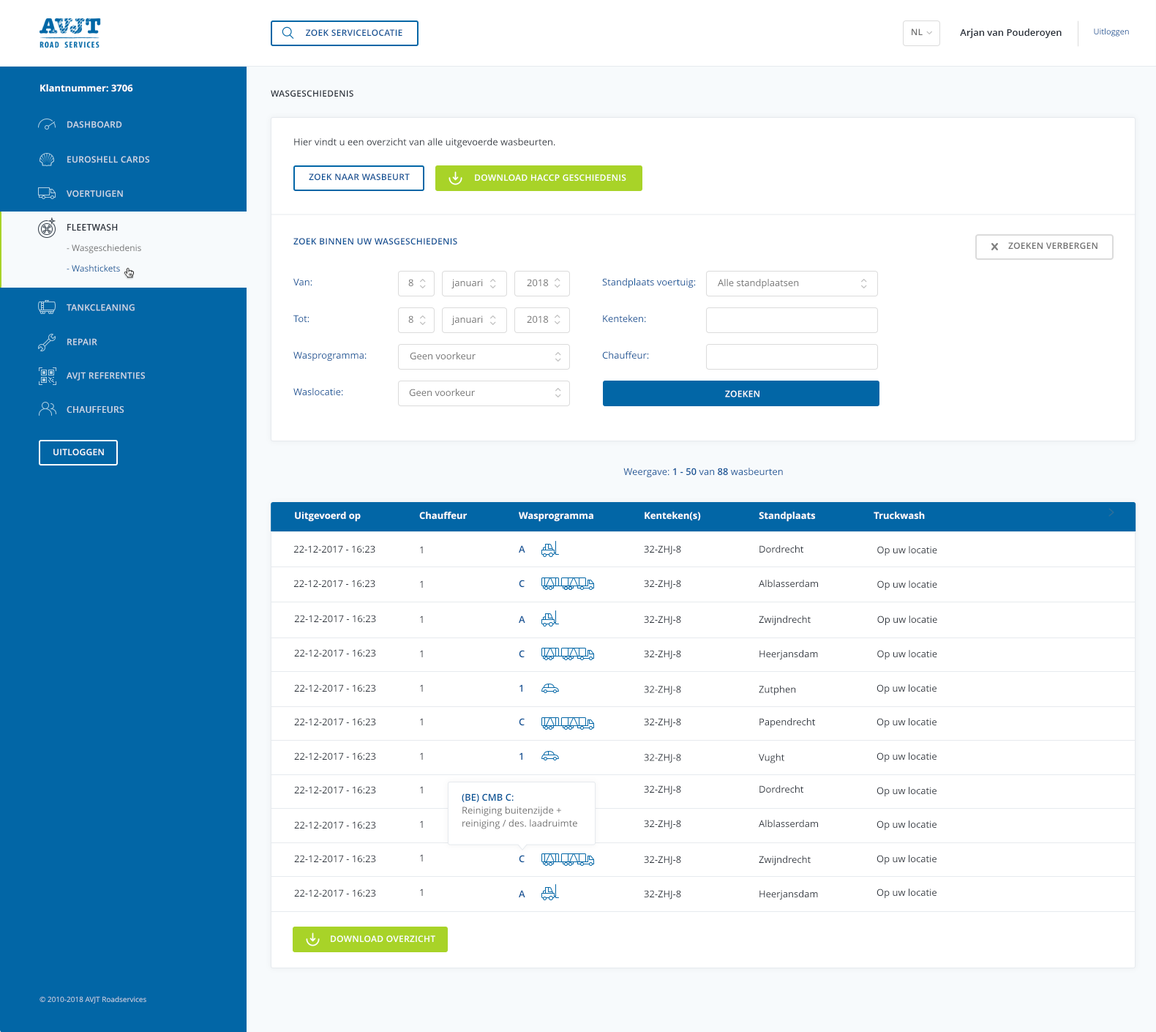
<style>
.page{position:relative;width:1156px;height:1032px;background:#ffffff}
.page>*{position:absolute;margin:0}
.t1{font:8.8px "OpenSans-Semibold";letter-spacing:0.023em;color:#0b5195;text-transform:uppercase}
.t2{font:8.8px "OpenSans-Semibold";letter-spacing:0.023em;color:#6d6d6d;text-transform:uppercase}
.t3{font:9.5px "OpenSans-Semibold";color:#262d37}
.t4{font:8px "OpenSans"}
.t5{font:9.5px "OpenSans-Bold";color:#ffffff}
.t6{font:8.8px "OpenSans-Semibold";letter-spacing:0.023em;color:#262d37;text-transform:uppercase}
.t7{font:8.8px "OpenSans-Semibold";letter-spacing:0.023em;color:#cbd8e6;text-transform:uppercase}
.t8{font:9.5px "OpenSans";color:#29303a}
.t9{font:8.8px "OpenSans-Semibold";letter-spacing:0.023em;color:#ffffff;text-transform:uppercase}
.t10{font:8.8px "OpenSans-Semibold";letter-spacing:0.023em;color:#cbd9e7;text-transform:uppercase}
.t11{font:8.8px "OpenSans";color:#6d6d6d}
.t12{font:8.8px "OpenSans";color:#0e5999}
.t13{font:9.5px "OpenSans";color:#0e5295}
.t14{font:9.5px "OpenSans";color:#6d6d6d}
.t15{font:9.5px "OpenSans";color:#135496}
.t16{font:9.5px "OpenSans";color:#155597}
.t17{font:9.5px "OpenSans";color:#2a5f9c}
.t18{font:9.5px "OpenSans";color:#145496}
.t19{font:9.5px "OpenSans";color:#0b5195}
.t20{font:9.5px "OpenSans-Semibold";color:#0b5195}
.t21{font:9.5px "OpenSans";color:#262d37}
.t22{font:9.5px "OpenSans";color:#2d333c}
.t23{font:9.5px "OpenSans-Semibold";color:#255d9b}
.t24{font:9.5px "OpenSans";color:#2d343c}
.t25{font:9.5px "OpenSans";color:#343b43}
.t26{font:9.5px "OpenSans";color:#2b313b}
.t27{font:9.5px "OpenSans";color:#2d343d}
.t28{font:9.5px "OpenSans-Semibold";color:#005396}
.t29{font:7.3px "OpenSans"}
</style>
<div class="page">
<p class="t1" style="left:306px;top:29px;width:96px;height:8px">zoek servicelocatie</p>
<p class="t2" style="left:912px;top:29px;width:11px;height:6px">NL</p>
<p class="t3" style="left:960px;top:29px;width:102px;height:9px">Arjan van Pouderoyen</p>
<p class="t4" style="left:1094px;top:28px;width:35px;height:9px">Uitloggen</p>
<p class="t5" style="left:40px;top:84px;width:93px;height:8px">Klantnummer: 3706</p>
<p class="t6" style="left:271px;top:90px;width:82px;height:7px">wasgeschiedenis</p>
<p class="t7" style="left:67px;top:121px;width:55px;height:7px">dashboard</p>
<p class="t8" style="left:294px;top:138px;width:261px;height:10px">Hier vindt u een overzicht van alle uitgevoerde wasbeurten.</p>
<p class="t7" style="left:67px;top:156px;width:83px;height:7px">EuroShell Cards</p>
<p class="t1" style="left:309px;top:173px;width:101px;height:8px">zoek naar wasbeurt</p>
<p class="t9" style="left:475px;top:174px;width:151px;height:7px">download haccp geschiedenis</p>
<p class="t10" style="left:67px;top:190px;width:56px;height:7px">voertuigen</p>
<p class="t6" style="left:67px;top:224px;width:51px;height:6px">fleetwash</p>
<p class="t11" style="left:67px;top:244px;width:74px;height:9px">- Wasgeschiedenis</p>
<p class="t1" style="left:293px;top:238px;width:164px;height:7px">Zoek binnen uw wasgeschiedenis</p>
<p class="t2" style="left:1008px;top:242px;width:89px;height:7px">zoeken verbergen</p>
<p class="t12" style="left:67px;top:264px;width:53px;height:8px">- Washtickets</p>
<p class="t13" style="left:293px;top:278px;width:19px;height:8px">Van:</p>
<p class="t14" style="left:408px;top:279px;width:5px;height:8px">8</p>
<p class="t14" style="left:451px;top:279px;width:32px;height:10px">januari</p>
<p class="t14" style="left:527px;top:279px;width:22px;height:8px">2018</p>
<p class="t15" style="left:602px;top:278px;width:94px;height:10px">Standplaats voertuig:</p>
<p class="t14" style="left:718px;top:279px;width:81px;height:10px">Alle standplaatsen</p>
<p class="t7" style="left:67px;top:304px;width:68px;height:7px">tankcleaning</p>
<p class="t16" style="left:293px;top:315px;width:16px;height:8px">Tot:</p>
<p class="t14" style="left:408px;top:315px;width:5px;height:8px">8</p>
<p class="t14" style="left:451px;top:315px;width:32px;height:11px">januari</p>
<p class="t14" style="left:527px;top:315px;width:22px;height:8px">2018</p>
<p class="t17" style="left:603px;top:315px;width:43px;height:8px">Kenteken:</p>
<p class="t10" style="left:67px;top:338px;width:30px;height:7px">repair</p>
<p class="t15" style="left:293px;top:351px;width:74px;height:10px">Wasprogramma:</p>
<p class="t14" style="left:410px;top:352px;width:66px;height:8px">Geen voorkeur</p>
<p class="t18" style="left:602px;top:351px;width:47px;height:8px">Chauffeur:</p>
<p class="t10" style="left:67px;top:372px;width:78px;height:8px">avjt referenties</p>
<p class="t19" style="left:293px;top:388px;width:50px;height:8px">Waslocatie:</p>
<p class="t14" style="left:409px;top:388px;width:66px;height:9px">Geen voorkeur</p>
<p class="t9" style="left:725px;top:390px;width:34px;height:7px">zoeken</p>
<p class="t10" style="left:67px;top:406px;width:57px;height:7px">chauffeurs</p>
<p class="t9" style="left:53px;top:448px;width:51px;height:8px">uitloggen</p>
<p class="t19" style="left:623px;top:467px;width:160px;height:11px">Weergave: <span class="t20">1 - 50 </span>van<span class="t20"> 88 </span>wasbeurten</p>
<p class="t5" style="left:295px;top:511px;width:66px;height:11px">Uitgevoerd op</p>
<p class="t5" style="left:419px;top:511px;width:48px;height:8px">Chauffeur</p>
<p class="t5" style="left:519px;top:511px;width:74px;height:11px">Wasprogramma</p>
<p class="t5" style="left:645px;top:511px;width:56px;height:10px">Kenteken(s)</p>
<p class="t5" style="left:759px;top:511px;width:57px;height:11px">Standplaats</p>
<p class="t5" style="left:874px;top:511px;width:51px;height:8px">Truckwash</p>
<p class="t21" style="left:293px;top:545px;width:82px;height:8px">22-12-2017 - 16:23</p>
<p class="t21" style="left:420px;top:546px;width:3px;height:7px">1</p>
<p class="t20" style="left:519px;top:545px;width:6px;height:7px">A</p>
<p class="t21" style="left:644px;top:545px;width:37px;height:10px">32-ZHJ-8</p>
<p class="t21" style="left:759px;top:545px;width:45px;height:8px">Dordrecht</p>
<p class="t8" style="left:877px;top:546px;width:60px;height:10px">Op uw locatie</p>
<p class="t21" style="left:293px;top:579px;width:82px;height:8px">22-12-2017 - 16:23</p>
<p class="t21" style="left:420px;top:580px;width:3px;height:7px">1</p>
<p class="t20" style="left:519px;top:579px;width:6px;height:8px">C</p>
<p class="t21" style="left:644px;top:579px;width:37px;height:10px">32-ZHJ-8</p>
<p class="t21" style="left:759px;top:579px;width:59px;height:8px">Alblasserdam</p>
<p class="t21" style="left:877px;top:580px;width:60px;height:10px">Op uw locatie</p>
<p class="t21" style="left:294px;top:615px;width:82px;height:8px">22-12-2017 - 16:23</p>
<p class="t21" style="left:420px;top:615px;width:3px;height:8px">1</p>
<p class="t20" style="left:519px;top:615px;width:6px;height:8px">A</p>
<p class="t21" style="left:644px;top:615px;width:37px;height:10px">32-ZHJ-8</p>
<p class="t21" style="left:759px;top:615px;width:52px;height:11px">Zwijndrecht</p>
<p class="t21" style="left:877px;top:615px;width:60px;height:11px">Op uw locatie</p>
<p class="t21" style="left:294px;top:649px;width:82px;height:8px">22-12-2017 - 16:23</p>
<p class="t21" style="left:420px;top:650px;width:3px;height:7px">1</p>
<p class="t20" style="left:519px;top:650px;width:6px;height:8px">C</p>
<p class="t21" style="left:644px;top:650px;width:37px;height:9px">32-ZHJ-8</p>
<p class="t21" style="left:759px;top:650px;width:59px;height:10px">Heerjansdam</p>
<p class="t22" style="left:877px;top:650px;width:60px;height:10px">Op uw locatie</p>
<p class="t21" style="left:294px;top:684px;width:82px;height:8px">22-12-2017 - 16:23</p>
<p class="t21" style="left:420px;top:684px;width:3px;height:7px">1</p>
<p class="t23" style="left:519px;top:684px;width:3px;height:7px">1</p>
<p class="t24" style="left:644px;top:686px;width:37px;height:8px">32-ZHJ-8</p>
<p class="t25" style="left:759px;top:685px;width:37px;height:10px">Zutphen</p>
<p class="t26" style="left:876px;top:684px;width:60px;height:10px">Op uw locatie</p>
<p class="t21" style="left:294px;top:718px;width:82px;height:8px">22-12-2017 - 16:23</p>
<p class="t21" style="left:420px;top:718px;width:3px;height:7px">1</p>
<p class="t20" style="left:519px;top:718px;width:6px;height:8px">C</p>
<p class="t21" style="left:644px;top:718px;width:37px;height:9px">32-ZHJ-8</p>
<p class="t21" style="left:759px;top:718px;width:57px;height:10px">Papendrecht</p>
<p class="t26" style="left:876px;top:718px;width:60px;height:10px">Op uw locatie</p>
<p class="t21" style="left:294px;top:752px;width:82px;height:8px">22-12-2017 - 16:23</p>
<p class="t21" style="left:420px;top:752px;width:3px;height:7px">1</p>
<p class="t23" style="left:519px;top:752px;width:3px;height:7px">1</p>
<p class="t24" style="left:644px;top:754px;width:37px;height:8px">32-ZHJ-8</p>
<p class="t27" style="left:759px;top:753px;width:26px;height:10px">Vught</p>
<p class="t26" style="left:876px;top:752px;width:60px;height:10px">Op uw locatie</p>
<p class="t21" style="left:294px;top:786px;width:82px;height:8px">22-12-2017 - 16:23</p>
<p class="t21" style="left:420px;top:786px;width:3px;height:7px">1</p>
<p class="t21" style="left:644px;top:785px;width:37px;height:10px">32-ZHJ-8</p>
<p class="t21" style="left:759px;top:785px;width:45px;height:8px">Dordrecht</p>
<p class="t14" style="left:462px;top:793px;width:115px;height:36px"><span class="t28">(BE) CMB C:<br></span>Reiniging buitenzijde +<br>reiniging / des. laadruimte</p>
<p class="t26" style="left:876px;top:786px;width:60px;height:11px">Op uw locatie</p>
<p class="t21" style="left:294px;top:821px;width:82px;height:8px">22-12-2017 - 16:23</p>
<p class="t21" style="left:420px;top:820px;width:3px;height:7px">1</p>
<p class="t21" style="left:644px;top:819px;width:37px;height:10px">32-ZHJ-8</p>
<p class="t21" style="left:759px;top:819px;width:59px;height:8px">Alblasserdam</p>
<p class="t26" style="left:876px;top:820px;width:60px;height:10px">Op uw locatie</p>
<p class="t21" style="left:294px;top:855px;width:82px;height:8px">22-12-2017 - 16:23</p>
<p class="t21" style="left:420px;top:854px;width:3px;height:7px">1</p>
<p class="t20" style="left:519px;top:855px;width:6px;height:8px">C</p>
<p class="t21" style="left:644px;top:855px;width:37px;height:10px">32-ZHJ-8</p>
<p class="t21" style="left:759px;top:855px;width:52px;height:10px">Zwijndrecht</p>
<p class="t26" style="left:876px;top:855px;width:60px;height:10px">Op uw locatie</p>
<p class="t21" style="left:294px;top:889px;width:82px;height:8px">22-12-2017 - 16:23</p>
<p class="t21" style="left:420px;top:888px;width:3px;height:7px">1</p>
<p class="t20" style="left:519px;top:890px;width:6px;height:7px">A</p>
<p class="t21" style="left:644px;top:890px;width:37px;height:9px">32-ZHJ-8</p>
<p class="t21" style="left:759px;top:890px;width:59px;height:10px">Heerjansdam</p>
<p class="t26" style="left:876px;top:888px;width:60px;height:10px">Op uw locatie</p>
<p class="t9" style="left:331px;top:935px;width:104px;height:7px">download overzicht</p>
<p class="t29" style="left:40px;top:996px;width:106px;height:7px">© 2010-2018 AVJT Roadservices</p>
</div>
